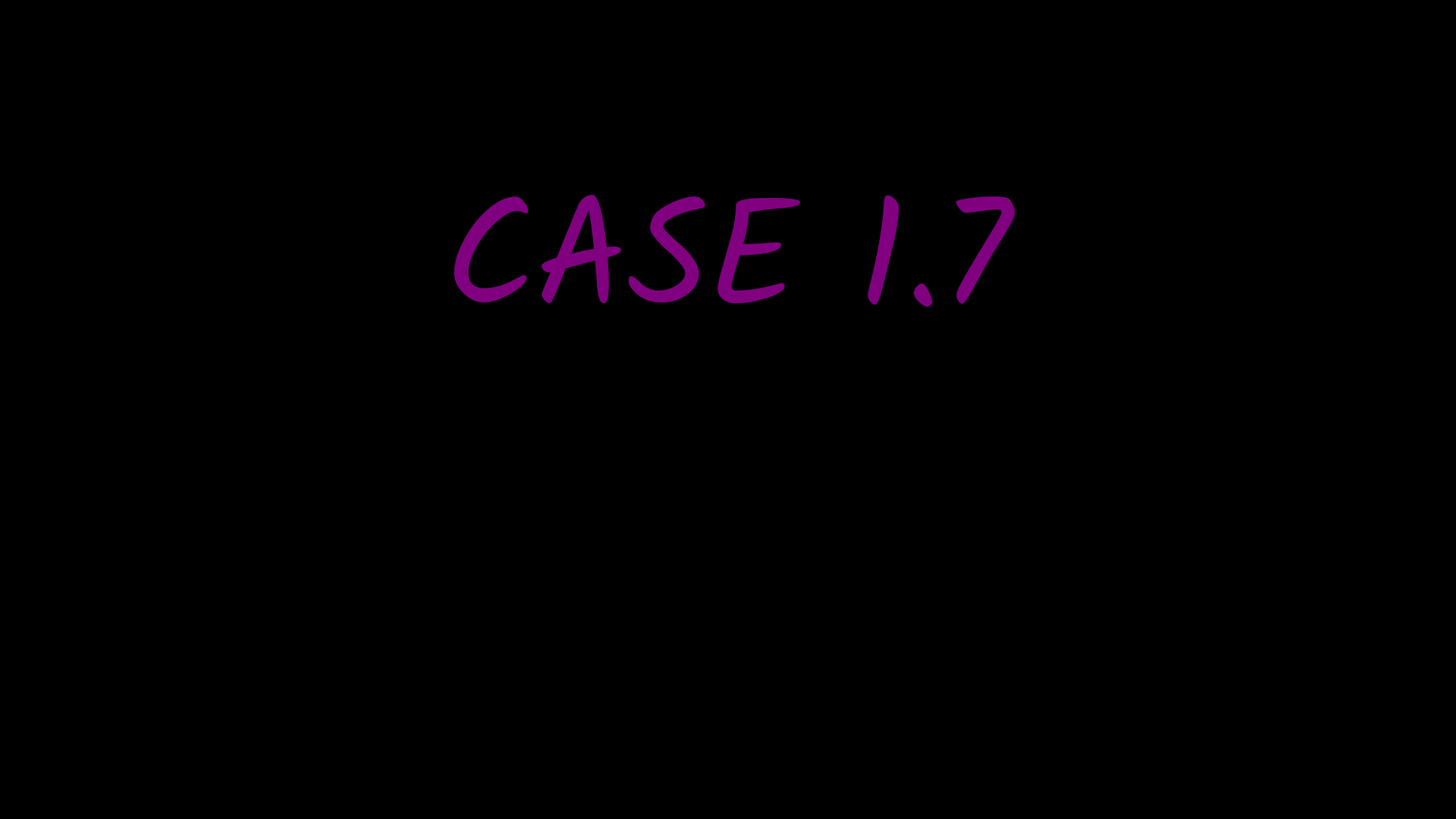
<style>
.page{position:relative;width:1456px;height:819px;background:#000000}
.page>*{position:absolute;margin:0}
.t1{font:151.7px "Kalam-Regular";color:#800080}
</style>
<div class="page">
<p class="t1" style="left:454px;top:195px;width:561px;height:112px">CASE 1.7</p>
</div>
